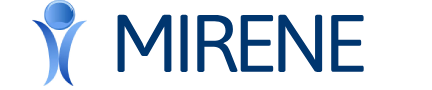
<style>
.page{position:relative;width:432px;height:90px;background:#ffffff}
.page>*{position:absolute;margin:0}
.t1{font:81.3px "Asap-Regular";letter-spacing:-0.075em;color:#00366f;text-transform:uppercase}
.t2{font:81.3px "Asap-Regular";color:#00366f;text-transform:uppercase}
</style>
<div class="page">
<p class="t1" style="left:117px;top:14px;width:247px;height:58px">miren<span class="t2">e</span></p>
</div>
